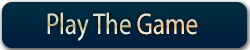
<style>
.page{position:relative;width:250px;height:50px}
.page>*{position:absolute;margin:0}
.t1{font:30px "MyriadPro-Regular";color:#011c2d;scale:0.83 1}
.t2{font:30px "MyriadPro-Regular";color:#d71818;scale:0.83 1}
</style>
<div class="page">
<p class="t1" style="left:47px;top:12px;width:151px;height:29px">Play The <span class="t2">Game</span></p>
</div>
